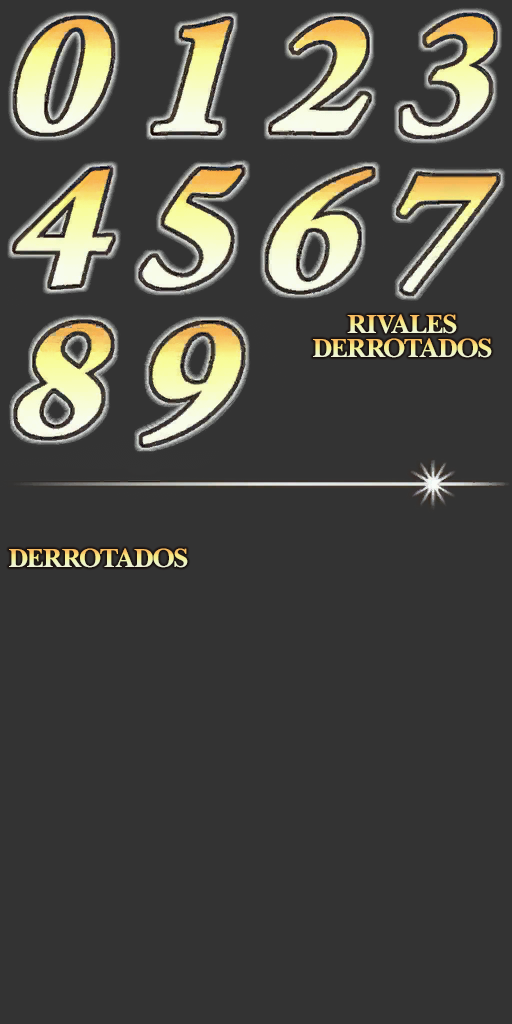
<style>
.page{position:relative;width:512px;height:1024px;background:#333333}
.page>*{position:absolute;margin:0}
.t1{font:26.8px "BaskervilleBT-Bold";letter-spacing:-0.04em}
</style>
<div class="page">
<p class="t1" style="left:347px;top:314px;width:110px;height:20px">RIVALES</p>
<p class="t1" style="left:313px;top:338px;width:179px;height:20px">DERROTADOS</p>
<p class="t1" style="left:9px;top:548px;width:179px;height:20px">DERROTADOS</p>
</div>
